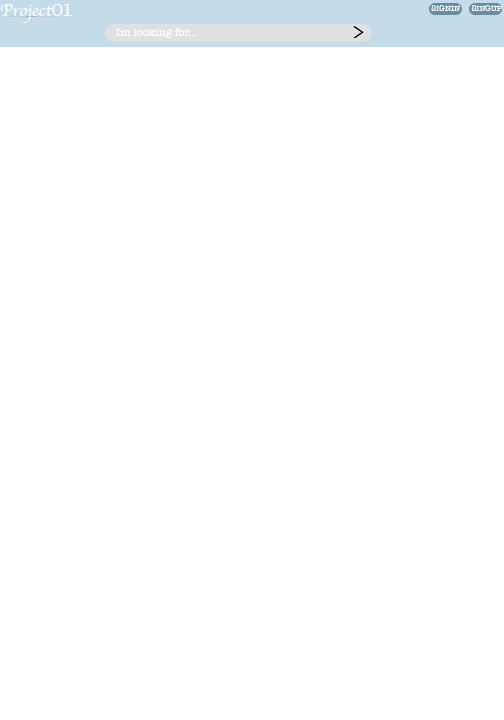
<style>
.page{position:relative;width:504px;height:720px;background:#ffffff}
.page>*{position:absolute;margin:0}
.t1{font:18px "Apple-Chancery";color:#fdfdfd}
.t2{font:18px "AmericanTypewriter";color:#fdfdfd}
.t3{font:8px "AmericanTypewriter";color:#ffffff}
.t4{font:11px "AmericanTypewriter";color:#ffffff}
</style>
<div class="page">
<p class="t1" style="left:0px;top:4px;width:72px;height:19px">Project<span class="t2">01</span></p>
<p class="t3" style="left:431px;top:5px;width:30px;height:6px">SIGNIN</p>
<p class="t3" style="left:471px;top:5px;width:31px;height:6px">SINGUP</p>
<p class="t4" style="left:116px;top:28px;width:81px;height:10px">Im looking for...</p>
</div>
